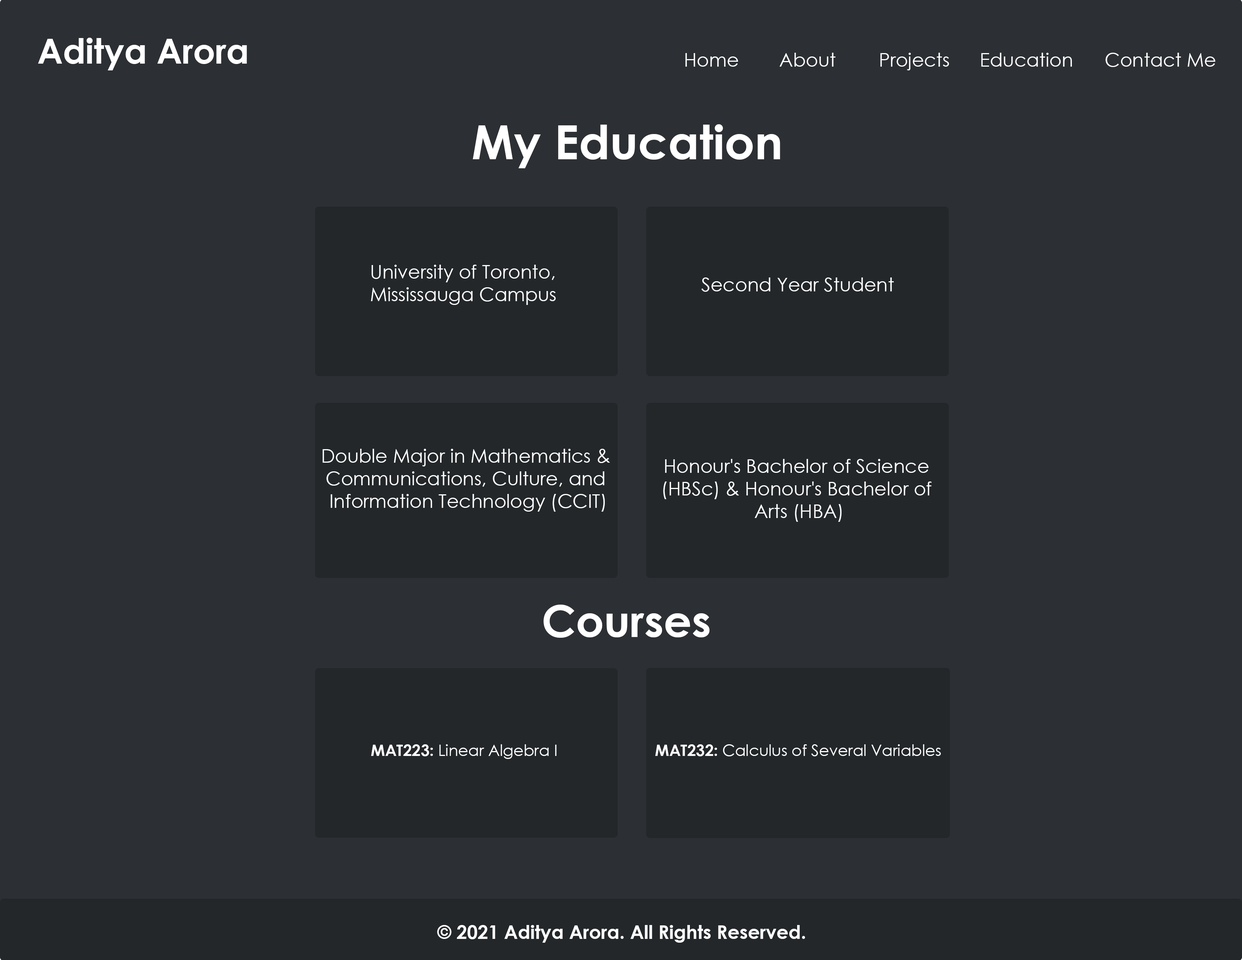
<style>
.page{position:relative;width:1242px;height:960px;background:#2c2f33}
.page>*{position:absolute;margin:0}
.t1{font:34.5px "CenturyGothic-Bold";color:#ffffff}
.t2{font:18.8px "CenturyGothic";color:#ffffff}
.t3{font:47.1px "CenturyGothic-Bold";color:#ffffff}
.t4{font:43.9px "CenturyGothic-Bold";color:#ffffff}
.t5{font:15.7px "CenturyGothic";color:#ffffff}
.t6{font:15.7px "CenturyGothic-Bold";color:#ffffff}
.t7{font:18.8px "CenturyGothic-Bold";color:#ffffff}
</style>
<div class="page">
<p class="t1" style="left:38px;top:38px;width:209px;height:32px">Aditya Arora</p>
<p class="t2" style="left:685px;top:53px;width:53px;height:14px">Home</p>
<p class="t2" style="left:780px;top:53px;width:56px;height:14px">About</p>
<p class="t2" style="left:880px;top:53px;width:69px;height:17px">Projects</p>
<p class="t2" style="left:981px;top:53px;width:91px;height:14px">Education</p>
<p class="t2" style="left:1106px;top:53px;width:110px;height:14px">Contact Me</p>
<p class="t3" style="left:473px;top:124px;width:307px;height:44px">My Education</p>
<p class="t2" style="left:371px;top:265px;width:185px;height:40px">University of Toronto,<br>Mississauga Campus</p>
<p class="t2" style="left:701px;top:277px;width:193px;height:15px">Second Year Student</p>
<p class="t2" style="left:323px;top:449px;width:287px;height:63px;text-align:center">Double Major in Mathematics &amp; <br>Communications, Culture, and <br>Information Technology (CCIT)</p>
<p class="t2" style="left:663px;top:459px;width:269px;height:63px;text-align:center">Honour's Bachelor of Science <br>(HBSc) &amp; Honour's Bachelor of <br>Arts (HBA)</p>
<p class="t4" style="left:544px;top:605px;width:166px;height:33px">Courses</p>
<p class="t5" style="left:371px;top:744px;width:186px;height:15px"><span class="t6">MAT223:</span> Linear Algebra I</p>
<p class="t5" style="left:655px;top:744px;width:286px;height:12px"><span class="t6">MAT232:</span> Calculus of Several Variables</p>
<p class="t7" style="left:437px;top:925px;width:368px;height:18px">© 2021 Aditya Arora. All Rights Reserved.</p>
</div>
